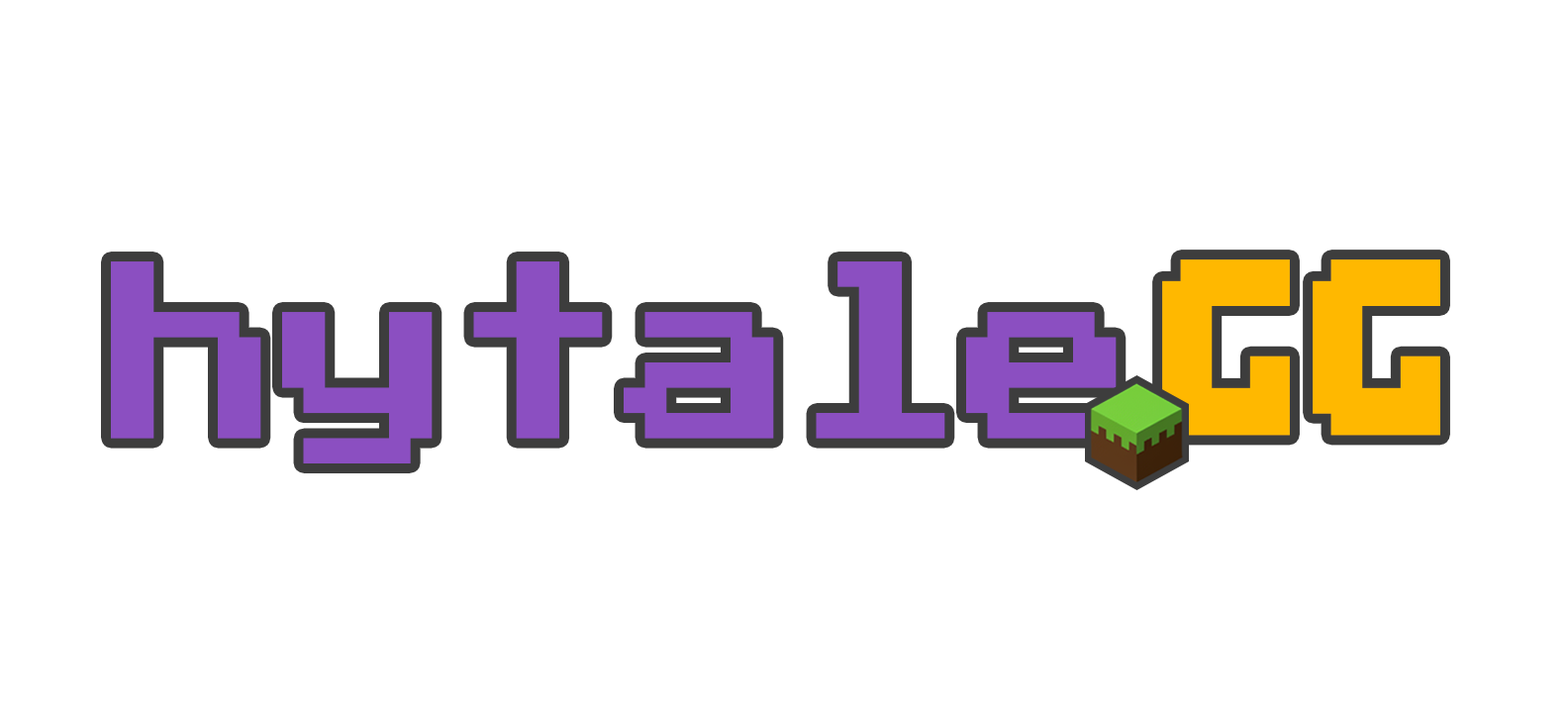
<style>
.page{position:relative;width:1568px;height:713px;background:#ffffff}
.page>*{position:absolute;margin:0}
.t1{font:201.9px "PressStart2P-Regular";color:#8b4fc1;scale:0.85 1}
.t2{font:223.3px "Minecrafter";letter-spacing:0.05em;color:#ffb800;scale:0.86 1}
</style>
<div class="page">
<p class="t1" style="left:111px;top:261px;width:1006px;height:202px">hytale</p>
<p class="t2" style="left:1162px;top:259px;width:278px;height:177px">GG</p>
</div>
